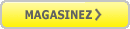
<style>
.page{position:relative;width:130px;height:29px}
.page>*{position:absolute;margin:0}
.t1{font:12px "Verdana-Bold";color:#606161;scale:0.83 1}
</style>
<div class="page">
<p class="t1" style="left:25px;top:10px;width:67px;height:10px">MAGASINEZ</p>
</div>
